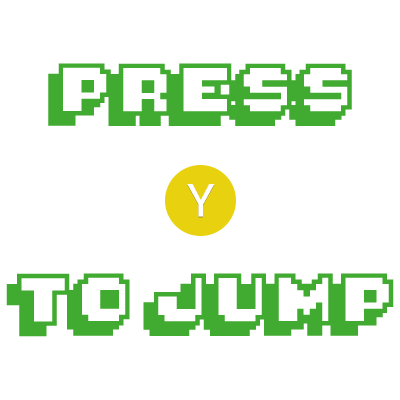
<style>
.page{position:relative;width:400px;height:400px;background:#ffffff}
.page>*{position:absolute;margin:0}
.t1{font:40px/210px "Pixelmania";color:#41aa30}
.t2{font:45.3px "Roboto-Regular";color:#ffffff}
</style>
<div class="page">
<p class="t1" style="left:6px;top:63px;width:388px;height:274px;text-align:center">PRESS<br>TO JUMP</p>
<p class="t2" style="left:187px;top:184px;width:28px;height:33px">Y</p>
</div>
